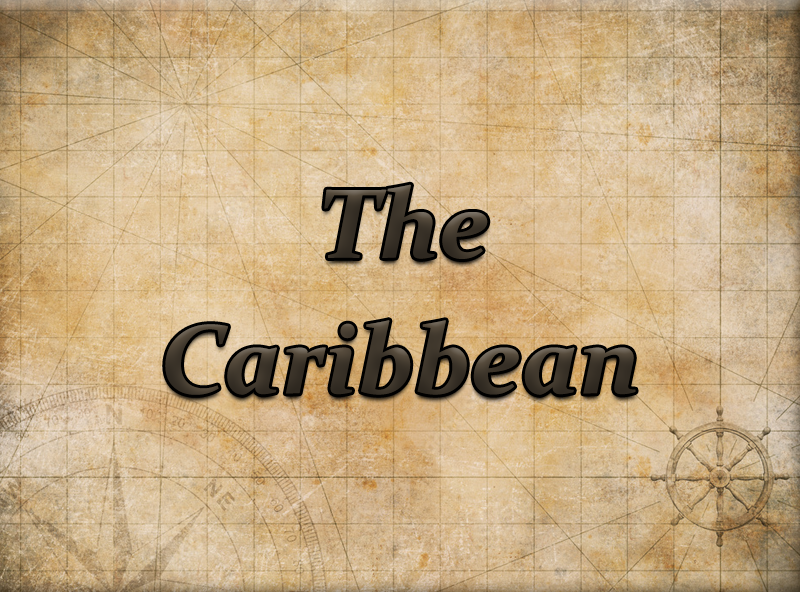
<style>
.page{position:relative;width:800px;height:592px}
.page>*{position:absolute;margin:0}
.t1{font:99.1px/135.6px "Constantia-BoldItalic";color:#3d352a}
</style>
<div class="page">
<p class="t1" style="left:165px;top:184px;width:471px;height:211px">The<br>Caribbean</p>
</div>
